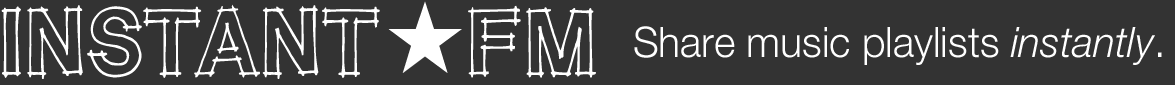
<style>
.page{position:relative;width:1175px;height:85px;background:#333333}
.page>*{position:absolute;margin:0}
.t1{font:90px "CAITLYN-Regular";letter-spacing:0.075em;color:#ffffff}
.t2{font:90px "CAITLYN-Regular";letter-spacing:0.05em;color:#ffffff}
.t3{font:90px "CAITLYN-Regular";color:#ffffff}
.t4{font:90px "CAITLYN-Regular";letter-spacing:-0.075em;color:#ffffff}
.t5{font:90px "CAITLYN-Regular";letter-spacing:0.01em;color:#ffffff}
.t6{font:90px "CAITLYN-Regular";letter-spacing:0.025em;color:#ffffff}
.t7{font:90px "AdobeFanHeitiStd-Bold";color:#ffffff}
.t8{font:90px "CAITLYN-Regular";letter-spacing:0.04em;color:#ffffff}
.t9{font:42px "HelveticaNeue-Light";color:#ffffff}
.t10{font:42px "HelveticaNeue-LightItalic";color:#ffffff}
</style>
<div class="page">
<p class="t1" style="left:1px;top:1px;width:595px;height:78px">I<span class="t2">N</span><span class="t3">S</span><span class="t4">T</span><span class="t5">A</span><span class="t6">N</span><span class="t3">T</span><span class="t7">★</span><span class="t8">F</span><span class="t3">M</span></p>
<p class="t9" style="left:634px;top:26px;width:528px;height:39px">Share music playlists <span class="t10">instantly</span>.</p>
</div>
